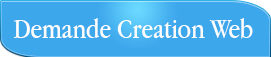
<style>
.page{position:relative;width:271px;height:57px;background:#3da7ec}
.page>*{position:absolute;margin:0}
.t1{font:28.5px "AppleGaramond";color:#fefefe}
</style>
<div class="page">
<p class="t1" style="left:14px;top:18px;width:239px;height:21px">Demande Creation Web</p>
</div>
